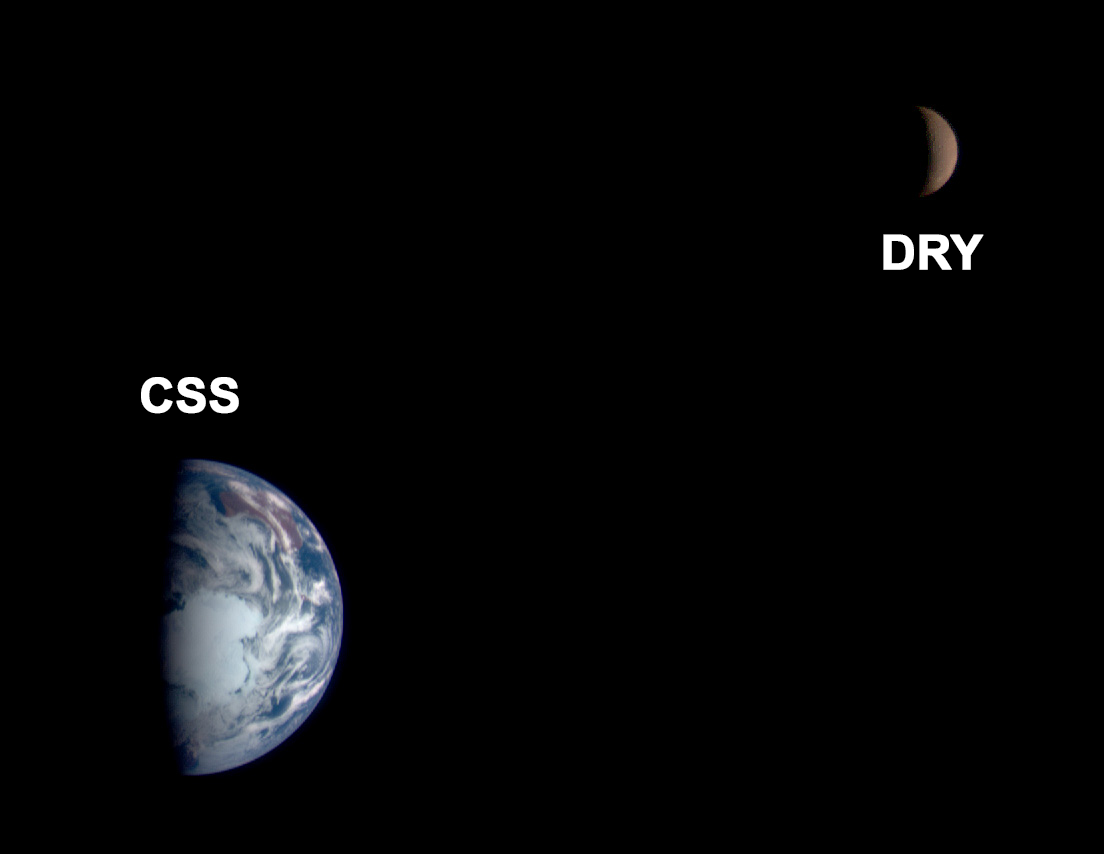
<style>
.page{position:relative;width:1104px;height:854px;background:#000000}
.page>*{position:absolute;margin:0}
.t1{font:48px "Arial-BoldMT";color:#ffffff;font-weight:bold}
</style>
<div class="page">
<p class="t1" style="left:883px;top:234px;width:101px;height:36px">DRY</p>
<p class="t1" style="left:141px;top:377px;width:98px;height:37px">CSS</p>
</div>
